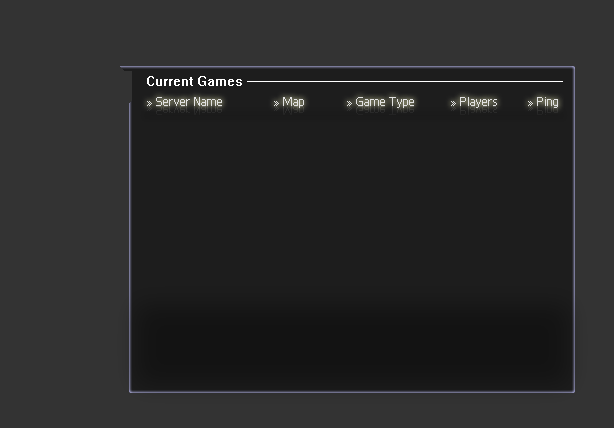
<style>
.page{position:relative;width:614px;height:428px;background:#333333}
.page>*{position:absolute;margin:0}
.t1{font:9px "System";color:#ffffff}
.t2{font:14.9px "ADMUI2Lg";color:#e2e2e2}
</style>
<div class="page">
<p class="t1" style="left:147px;top:76px;width:416px;height:10px">Current Games -------------------------------------------------------------------------------</p>
<p class="t2" style="left:147px;top:97px;width:411px;height:11px">» Server Name                 » Map              » Game Type            » Players          » Ping</p>
</div>
